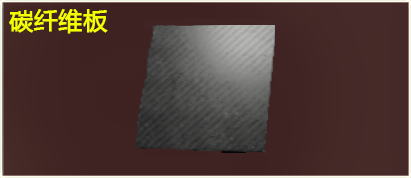
<style>
.page{position:relative;width:411px;height:178px}
.page>*{position:absolute;margin:0}
.t1{font:24px "MicrosoftYaHeiUI";color:#f4ff00;font-weight:bold}
</style>
<div class="page">
<p class="t1" style="left:9px;top:9px;width:99px;height:25px">碳纤维板</p>
</div>
